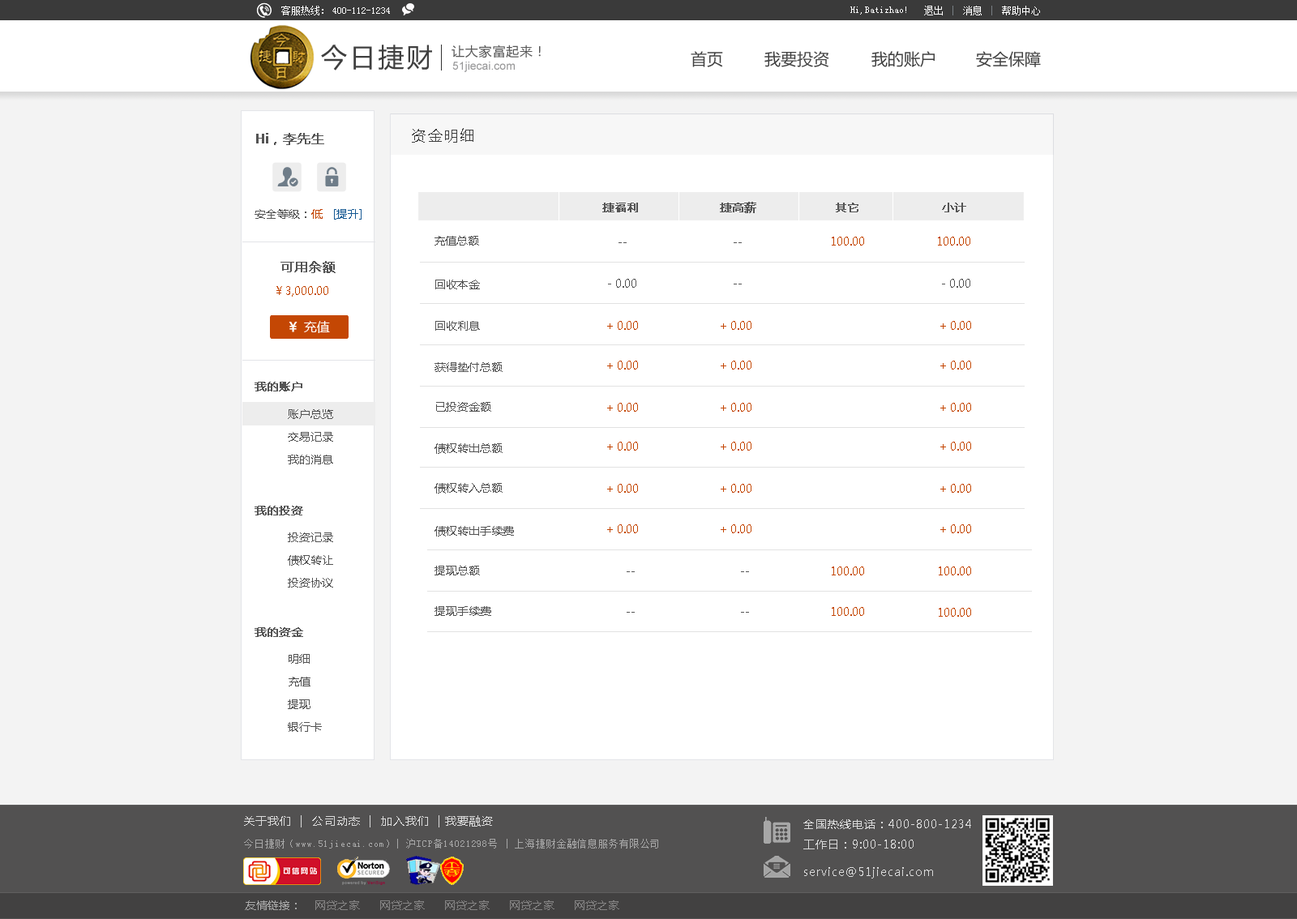
<style>
.page{position:relative;width:1297px;height:919px;background:#ffffff}
.page>*{position:absolute;margin:0}
.t1{font:9.7px "SimSun";color:#ffffff}
.t2{font:25.9px "MicrosoftYaHei";letter-spacing:0.1em;color:#3f3f3f}
.t3{font:13px "MicrosoftYaHei";letter-spacing:0.05em;color:#575757}
.t4{font:16.2px "MicrosoftYaHei";color:#414141}
.t5{font:11.3px "ArialMT";color:#969697}
.t6{font:13px "MicrosoftYaHei";color:#545454;font-weight:bold}
.t7{font:14.6px "MicrosoftYaHei";letter-spacing:0.1em;color:#3f3f3f}
.t8{font:11.3px "MicrosoftYaHei";color:#545454}
.t9{font:11.3px "MicrosoftYaHei";color:#c44704}
.t10{font:11.3px "MicrosoftYaHei";color:#175a94}
.t11{font:11.3px "MicrosoftYaHei";color:#545454;font-weight:bold}
.t12{font:11.3px "MicrosoftYaHei";color:#c44703}
.t13{font:13px "MicrosoftYaHei";color:#ffffff}
.t14{font:13px "MicrosoftYaHei";color:#ffffff;font-weight:bold}
.t15{font:11.3px/22.7px "MicrosoftYaHei";color:#545454}
.t16{font:11.3px "MicrosoftYaHei";letter-spacing:0.07em;color:#dbdbdb}
.t17{font:11.3px "MicrosoftYaHei";letter-spacing:0.07em;color:#dadada}
.t18{font:9.7px "SimSun";letter-spacing:0.07em;color:#a7a7a7}
.t19{font:11.3px "MicrosoftYaHei";color:#858484}
.t20{font:11.3px "MicrosoftYaHei";color:#a7a7a7}
</style>
<div class="page">
<p class="t1" style="left:281px;top:6px;width:42px;height:9px">客服热线：</p>
<p class="t1" style="left:924px;top:6px;width:116px;height:9px">退出    消息    帮助中心</p>
<p class="t1" style="left:332px;top:7px;width:58px;height:7px">400-112-1234</p>
<p class="t1" style="left:850px;top:6px;width:56px;height:9px">Hi,Batizhao!</p>
<p class="t2" style="left:321px;top:45px;width:111px;height:26px">今日捷财</p>
<p class="t3" style="left:452px;top:45px;width:89px;height:13px">让大家富起来！</p>
<p class="t4" style="left:691px;top:51px;width:32px;height:16px">首页</p>
<p class="t4" style="left:764px;top:51px;width:65px;height:16px">我要投资</p>
<p class="t4" style="left:871px;top:51px;width:64px;height:16px">我的账户</p>
<p class="t4" style="left:976px;top:51px;width:65px;height:16px">安全保障</p>
<p class="t5" style="left:452px;top:62px;width:63px;height:10px">51jiecai.com</p>
<p class="t6" style="left:256px;top:133px;width:68px;height:12px">Hi，李先生</p>
<p class="t7" style="left:412px;top:128px;width:61px;height:15px">资金明细</p>
<p class="t8" style="left:255px;top:209px;width:107px;height:11px">安全等级：<span class="t9">低   </span><span class="t10">[提升]</span></p>
<p class="t11" style="left:602px;top:203px;width:36px;height:9px">捷福利</p>
<p class="t11" style="left:720px;top:202px;width:36px;height:11px">捷高薪</p>
<p class="t11" style="left:836px;top:203px;width:23px;height:9px">其它</p>
<p class="t11" style="left:942px;top:203px;width:24px;height:9px">小计</p>
<p class="t8" style="left:435px;top:236px;width:44px;height:10px">充值总额</p>
<p class="t8" style="left:619px;top:242px;width:8px;height:1px">--</p>
<p class="t8" style="left:734px;top:242px;width:8px;height:1px">--</p>
<p class="t9" style="left:832px;top:237px;width:32px;height:9px">100.00</p>
<p class="t9" style="left:938px;top:237px;width:32px;height:9px">100.00</p>
<p class="t6" style="left:280px;top:261px;width:56px;height:12px">可用余额</p>
<p class="t8" style="left:435px;top:280px;width:45px;height:9px">回收本金</p>
<p class="t8" style="left:608px;top:279px;width:28px;height:9px">- 0.00</p>
<p class="t8" style="left:942px;top:279px;width:28px;height:9px">- 0.00</p>
<p class="t12" style="left:276px;top:286px;width:52px;height:11px">￥3,000.00</p>
<p class="t8" style="left:734px;top:284px;width:8px;height:1px">--</p>
<p class="t13" style="left:289px;top:321px;width:41px;height:12px"><span class="t14">￥ </span>充值</p>
<p class="t8" style="left:435px;top:321px;width:45px;height:10px">回收利息</p>
<p class="t9" style="left:607px;top:321px;width:31px;height:9px">+ 0.00</p>
<p class="t9" style="left:721px;top:321px;width:31px;height:9px">+ 0.00</p>
<p class="t9" style="left:940px;top:321px;width:31px;height:9px">+ 0.00</p>
<p class="t8" style="left:435px;top:362px;width:68px;height:10px">获得垫付总额</p>
<p class="t9" style="left:607px;top:361px;width:31px;height:9px">+ 0.00</p>
<p class="t9" style="left:721px;top:361px;width:31px;height:9px">+ 0.00</p>
<p class="t9" style="left:940px;top:361px;width:31px;height:9px">+ 0.00</p>
<p class="t11" style="left:255px;top:382px;width:47px;height:10px">我的账户</p>
<p class="t15" style="left:288px;top:409px;width:45px;height:56px">账户总览<br>交易记录<br>我的消息</p>
<p class="t8" style="left:436px;top:402px;width:55px;height:10px">已投资金额</p>
<p class="t9" style="left:607px;top:403px;width:31px;height:9px">+ 0.00</p>
<p class="t9" style="left:721px;top:403px;width:31px;height:9px">+ 0.00</p>
<p class="t9" style="left:940px;top:403px;width:31px;height:9px">+ 0.00</p>
<p class="t8" style="left:435px;top:443px;width:68px;height:11px">债权转出总额</p>
<p class="t9" style="left:607px;top:442px;width:31px;height:9px">+ 0.00</p>
<p class="t9" style="left:721px;top:442px;width:31px;height:9px">+ 0.00</p>
<p class="t9" style="left:940px;top:442px;width:31px;height:9px">+ 0.00</p>
<p class="t8" style="left:435px;top:483px;width:68px;height:11px">债权转入总额</p>
<p class="t9" style="left:607px;top:484px;width:31px;height:9px">+ 0.00</p>
<p class="t9" style="left:721px;top:484px;width:31px;height:9px">+ 0.00</p>
<p class="t9" style="left:940px;top:484px;width:31px;height:9px">+ 0.00</p>
<p class="t11" style="left:255px;top:506px;width:48px;height:10px">我的投资</p>
<p class="t15" style="left:288px;top:533px;width:45px;height:55px">投资记录<br>债权转让<br>投资协议</p>
<p class="t8" style="left:435px;top:526px;width:79px;height:11px">债权转出手续费</p>
<p class="t9" style="left:607px;top:525px;width:31px;height:8px">+ 0.00</p>
<p class="t9" style="left:721px;top:525px;width:31px;height:8px">+ 0.00</p>
<p class="t9" style="left:940px;top:525px;width:31px;height:8px">+ 0.00</p>
<p class="t8" style="left:435px;top:566px;width:45px;height:10px">提现总额</p>
<p class="t9" style="left:832px;top:567px;width:32px;height:9px">100.00</p>
<p class="t9" style="left:939px;top:567px;width:32px;height:9px">100.00</p>
<p class="t8" style="left:627px;top:572px;width:8px;height:0px">--</p>
<p class="t8" style="left:741px;top:572px;width:8px;height:0px">--</p>
<p class="t8" style="left:435px;top:606px;width:56px;height:10px">提现手续费</p>
<p class="t8" style="left:627px;top:612px;width:8px;height:1px">--</p>
<p class="t8" style="left:741px;top:612px;width:8px;height:1px">--</p>
<p class="t9" style="left:832px;top:607px;width:32px;height:9px">100.00</p>
<p class="t9" style="left:939px;top:608px;width:32px;height:9px">100.00</p>
<p class="t11" style="left:255px;top:627px;width:48px;height:10px">我的资金</p>
<p class="t15" style="left:288px;top:654px;width:34px;height:78px">明细<br>充值<br>提现<br>银行卡</p>
<p class="t16" style="left:244px;top:816px;width:249px;height:12px">关于我们  |  公司动态  |  加入我们  | 我要融资</p>
<p class="t17" style="left:803px;top:820px;width:168px;height:30px">全国热线电话：400-800-1234<br>工作日：9:00-18:00</p>
<p class="t18" style="left:244px;top:839px;width:414px;height:10px">今日捷财（www.51jiecai.com）| 沪ICP备14021298号 | 上海捷财金融信息服务有限公司</p>
<p class="t17" style="left:804px;top:867px;width:129px;height:12px">service@51jiecai.com</p>
<p class="t19" style="left:245px;top:901px;width:374px;height:9px"><span class="t20">友情链接：</span>    网贷之家      网贷之家      网贷之家      网贷之家      网贷之家</p>
</div>
